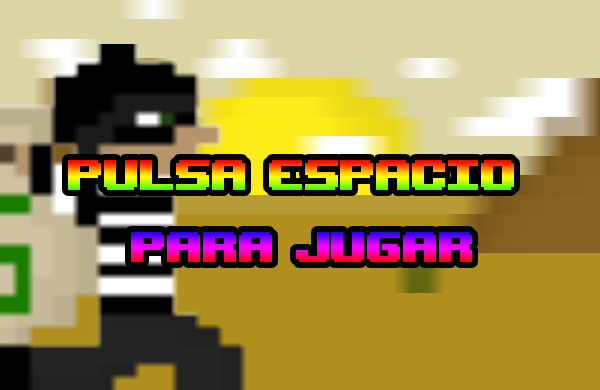
<style>
.page{position:relative;width:600px;height:390px;background:#b08f1e}
.page>*{position:absolute;margin:0}
.t1{font:60px "UpheavalTT-BRK-"}
</style>
<div class="page">
<p class="t1" style="left:68px;top:160px;width:446px;height:102px;text-align:center">PULSA eSPACIO <br>PARA JUGAR</p>
</div>
